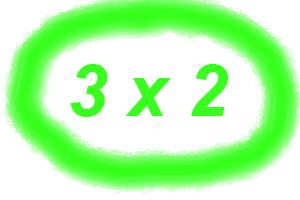
<style>
.page{position:relative;width:300px;height:200px;background:#ffffff}
.page>*{position:absolute;margin:0}
.t1{font:72px "Arial-BoldItalicMT";color:#36ff1b}
</style>
<div class="page">
<p class="t1" style="left:70px;top:64px;width:159px;height:53px">3 x 2</p>
</div>
